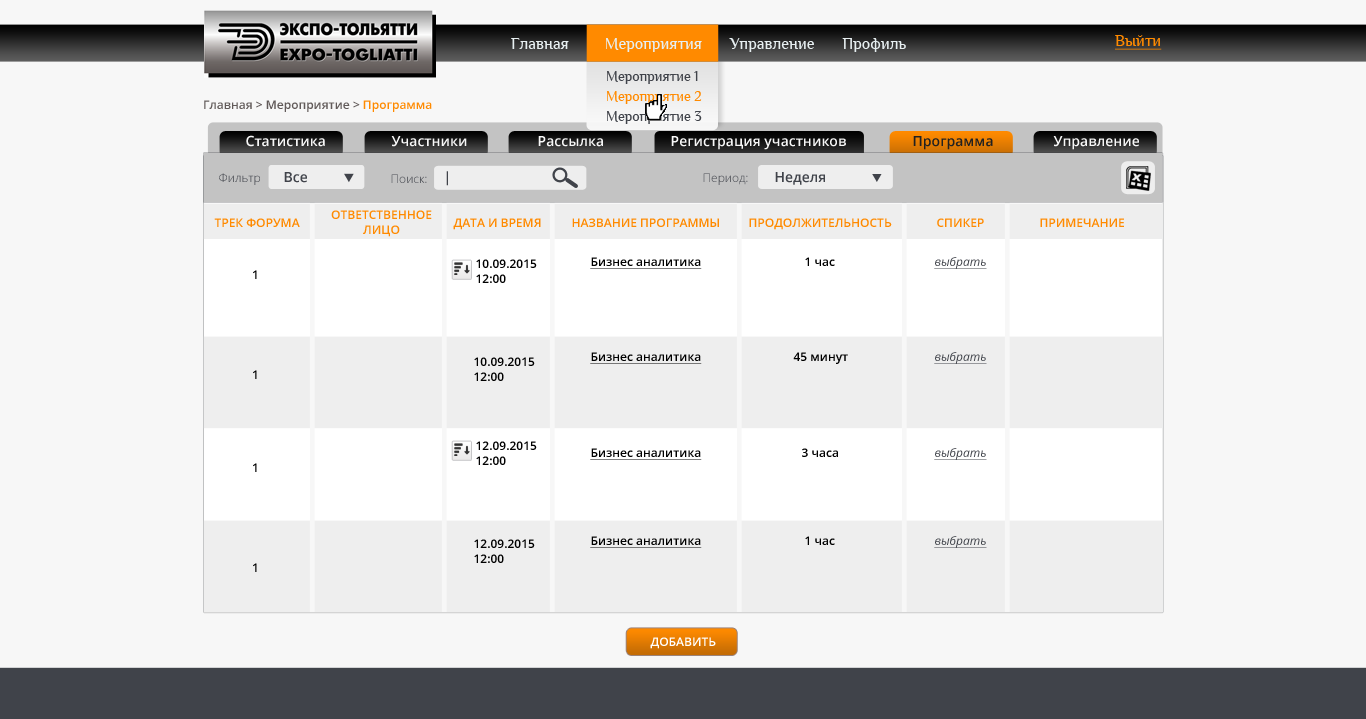
<style>
.page{position:relative;width:1366px;height:719px;background:#f7f7f7}
.page>*{position:absolute;margin:0}
.t1{font:16.5px "Philosopher";color:#e7eff1}
.t2{font:16px "Philosopher";color:#ff8a00;text-decoration:underline}
.t3{font:14.4px/20px "Philosopher";color:#40434a}
.t4{font:14.4px/20px "Philosopher";color:#ff8a00}
.t5{font:12px "OpenSans-Semibold";color:#615a59}
.t6{font:12px "OpenSans-Semibold";color:#ff8a00}
.t7{font:14px "OpenSans-Semibold";color:#f7f7f7}
.t8{font:14px "OpenSans-Semibold";color:#212121}
.t9{font:12px "OpenSans-Light"}
.t10{font:14px "OpenSans-Semibold";color:#40434a}
.t11{font:12px "OpenSans-Light";color:#40434a}
.t12{font:12px "OpenSans-Semibold";color:#ff8a00;text-transform:uppercase}
.t13{font:12px "OpenSans-Semibold";color:#000000;text-decoration:underline}
.t14{font:12px "OpenSans-Semibold";color:#000000}
.t15{font:12px "OpenSans-Italic";color:#40434a;text-decoration:underline}
.t16{font:12px "OpenSans-Semibold";color:#ffffff}
</style>
<div class="page">
<p class="t1" style="left:511px;top:38px;width:395px;height:14px">Главная         Мероприятия       Управление       Профиль</p>
<p class="t2" style="left:1115px;top:35px;width:47px;height:15px">Выйти</p>
<p class="t3" style="left:607px;top:71px;width:95px;height:53px">Мероприятие 1<br><span class="t4">Мероприятие 2<br></span>Мероприятие 3</p>
<p class="t5" style="left:204px;top:100px;width:228px;height:12px">Главная &gt; Мероприятие &gt; <span class="t6">Программа</span></p>
<p class="t7" style="left:246px;top:135px;width:79px;height:12px">Статистика</p>
<p class="t7" style="left:391px;top:136px;width:76px;height:11px">Участники</p>
<p class="t7" style="left:538px;top:136px;width:65px;height:11px">Рассылка</p>
<p class="t7" style="left:671px;top:136px;width:175px;height:14px">Регистрация участников</p>
<p class="t8" style="left:913px;top:136px;width:80px;height:14px">Программа</p>
<p class="t7" style="left:1053px;top:136px;width:86px;height:14px">Управление</p>
<p class="t9" style="left:219px;top:173px;width:41px;height:12px">Фильтр</p>
<p class="t10" style="left:284px;top:172px;width:23px;height:11px">Все</p>
<p class="t11" style="left:391px;top:174px;width:36px;height:9px">Поиск:</p>
<p class="t10" style="left:446px;top:171px;width:2px;height:15px">|</p>
<p class="t9" style="left:703px;top:173px;width:45px;height:12px">Период:</p>
<p class="t10" style="left:775px;top:172px;width:50px;height:13px">Неделя</p>
<p class="t12" style="left:214px;top:218px;width:86px;height:9px">трек форума</p>
<p class="t12" style="left:331px;top:210px;width:101px;height:27px;text-align:center">ответственное<br>лицо</p>
<p class="t12" style="left:453px;top:218px;width:88px;height:12px">дата и время</p>
<p class="t12" style="left:572px;top:218px;width:147px;height:9px">название программы</p>
<p class="t12" style="left:749px;top:218px;width:143px;height:12px">продолжительность</p>
<p class="t12" style="left:937px;top:218px;width:47px;height:9px">Спикер</p>
<p class="t12" style="left:1040px;top:218px;width:84px;height:9px">примечание</p>
<p class="t13" style="left:590px;top:257px;width:112px;height:12px">Бизнес аналитика</p>
<p class="t14" style="left:805px;top:257px;width:30px;height:9px">1 час</p>
<p class="t15" style="left:934px;top:257px;width:53px;height:12px">выбрать</p>
<p class="t14" style="left:253px;top:270px;width:4px;height:9px">1</p>
<p class="t14" style="left:476px;top:259px;width:61px;height:24px">10.09.2015<br>12:00</p>
<p class="t13" style="left:590px;top:352px;width:112px;height:12px">Бизнес аналитика</p>
<p class="t14" style="left:793px;top:352px;width:55px;height:12px">45 минут</p>
<p class="t15" style="left:934px;top:352px;width:53px;height:12px">выбрать</p>
<p class="t14" style="left:474px;top:357px;width:61px;height:24px">10.09.2015<br>12:00</p>
<p class="t14" style="left:253px;top:370px;width:4px;height:9px">1</p>
<p class="t14" style="left:476px;top:441px;width:61px;height:24px">12.09.2015<br>12:00</p>
<p class="t13" style="left:590px;top:448px;width:112px;height:12px">Бизнес аналитика</p>
<p class="t14" style="left:802px;top:448px;width:36px;height:9px">3 часа</p>
<p class="t15" style="left:934px;top:448px;width:53px;height:12px">выбрать</p>
<p class="t14" style="left:253px;top:463px;width:4px;height:9px">1</p>
<p class="t14" style="left:474px;top:539px;width:61px;height:24px">12.09.2015<br>12:00</p>
<p class="t13" style="left:590px;top:536px;width:112px;height:12px">Бизнес аналитика</p>
<p class="t14" style="left:805px;top:536px;width:30px;height:9px">1 час</p>
<p class="t15" style="left:934px;top:536px;width:53px;height:12px">выбрать</p>
<p class="t14" style="left:253px;top:563px;width:4px;height:9px">1</p>
<p class="t16" style="left:650px;top:637px;width:66px;height:12px">ДОБАВИТЬ</p>
</div>
